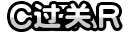
<style>
.page{position:relative;width:128px;height:32px;background:#ffffff}
.page>*{position:absolute;margin:0}
.t1{font:26.7px "DFPYuanW9";letter-spacing:0.1em;scale:1.05 1}
</style>
<div class="page">
<p class="t1" style="left:34px;top:3px;width:57px;height:26px">过关</p>
</div>
